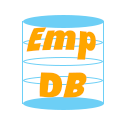
<style>
.page{position:relative;width:128px;height:128px;background:#ffffff}
.page>*{position:absolute;margin:0}
.t1{font:33.3px "AvenirNextCondensed-HeavyItalic";color:#ffa600}
</style>
<div class="page">
<p class="t1" style="left:26px;top:27px;width:70px;height:71px;text-align:center">Emp<br>DB</p>
</div>
